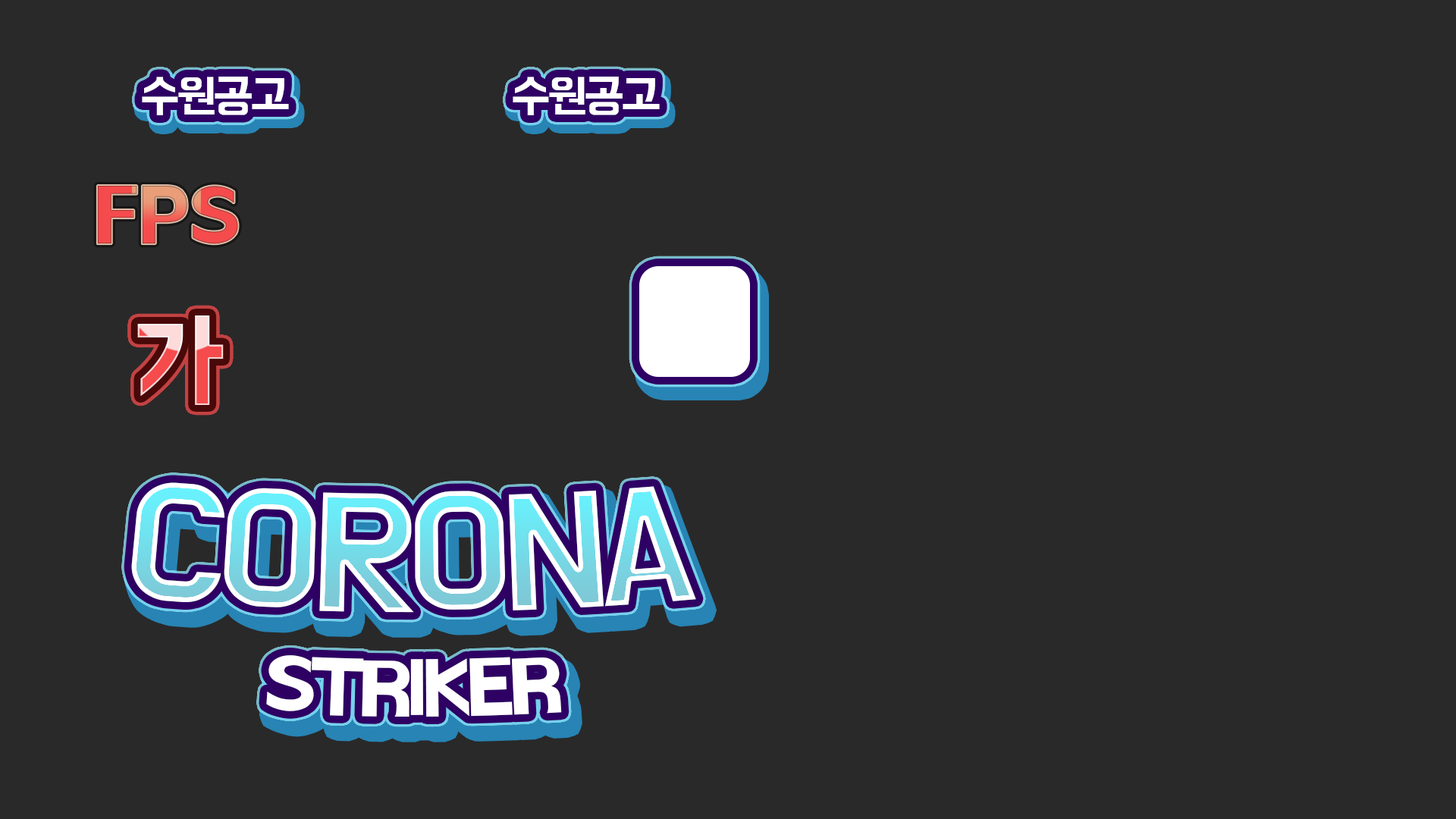
<style>
.page{position:relative;width:1456px;height:819px;background:#292929}
.page>*{position:absolute;margin:0}
.t1{font:45.1px "BMHANNA11yrsold";letter-spacing:-0.075em;color:#ffffff;scale:1.05 1}
.t2{font:78.7px "BMHANNA11yrsold";color:#f54b4c}
.t3{font:109px "BMHANNA11yrsold"}
.t4{font:138.9px "BMDoHyeon";letter-spacing:-0.075em;scale:1.05 1}
.t5{font:76.6px "BMHANNA11yrsold";letter-spacing:-0.075em;color:#ffffff;scale:1.05 1}
</style>
<div class="page">
<p class="t1" style="left:142px;top:77px;width:147px;height:38px">수원공고</p>
<p class="t1" style="left:513px;top:77px;width:147px;height:38px">수원공고</p>
<p class="t2" style="left:97px;top:186px;width:141px;height:58px">FPS</p>
<p class="t3" style="left:137px;top:315px;width:87px;height:90px">가</p>
<p class="t4" style="left:131px;top:482px;width:565px;height:131px">CORONA</p>
<p class="t5" style="left:266px;top:655px;width:296px;height:62px">STRIKER</p>
</div>
